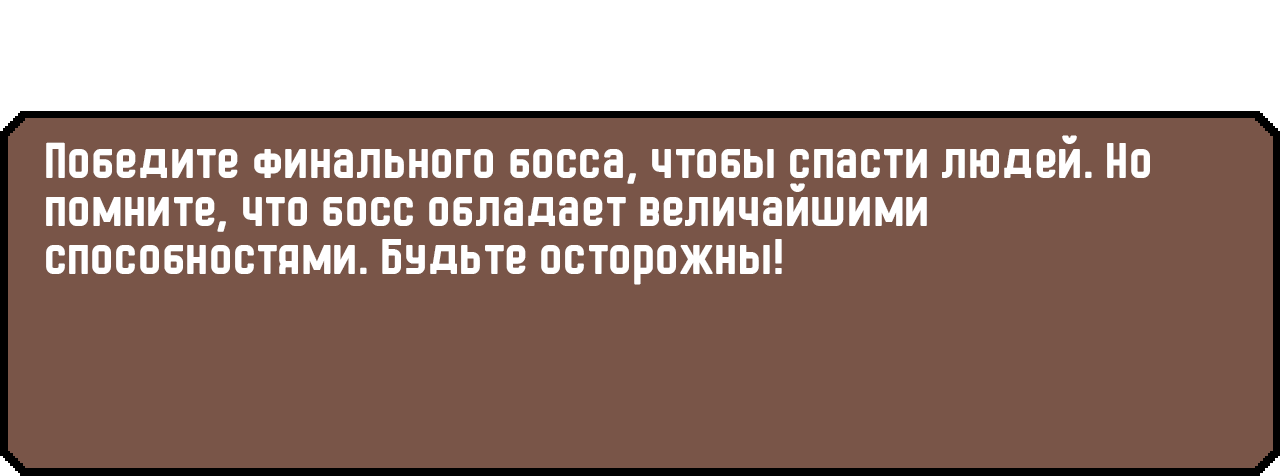
<style>
.page{position:relative;width:1280px;height:476px;background:#795548}
.page>*{position:absolute;margin:0}
.t1{font:48px/48px "HermanoMayor";color:#ffffff}
</style>
<div class="page">
<p class="t1" style="left:46px;top:135px;width:1104px;height:150px">Победите финального босса, чтобы спасти людей. Но помните, что босс обладает величайшими способностями. Будьте осторожны!</p>
</div>
